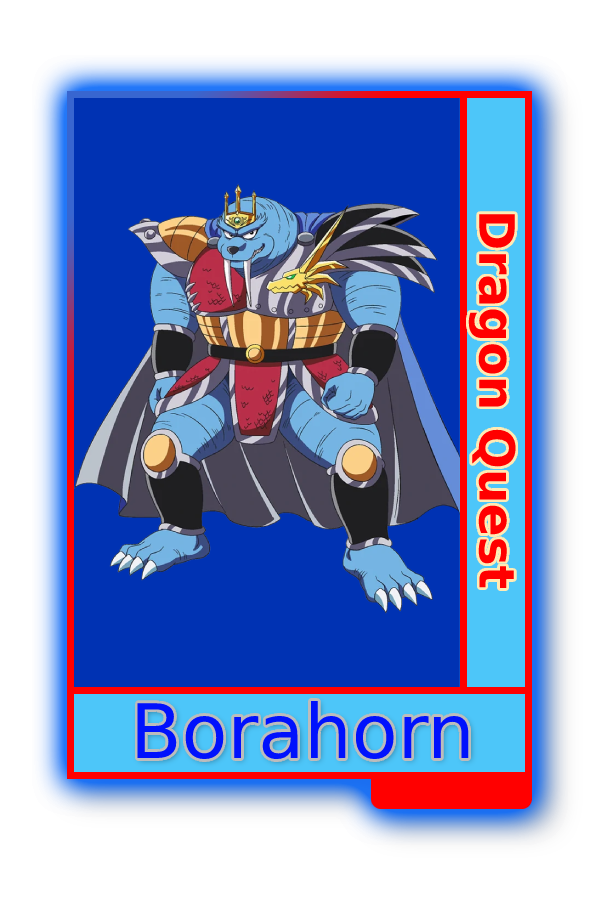
<style>
.page{position:relative;width:600px;height:900px;background:#0032b3}
.page>*{position:absolute;margin:0}
.t1{font:48.8px "MADETOMMY-Bold";color:#ff0000}
.t2{font:75px "CoolveticaRg-Regular";color:#0011fd}
</style>
<div class="page">
<p class="t1" style="left:468px;top:214px;width:48px;height:374px;rotate:90deg">Dragon Quest</p>
<p class="t2" style="left:137px;top:701px;width:332px;height:59px">Borahorn</p>
</div>
